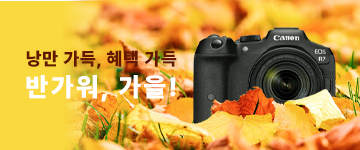
<style>
.page{position:relative;width:360px;height:150px}
.page>*{position:absolute;margin:0}
.t1{font:18px "Pretendard-Black";letter-spacing:0.05em;color:#641802}
.t2{font:26px "Pretendard-Black";letter-spacing:0.1em;color:#ffffff}
</style>
<div class="page">
<p class="t1" style="left:26px;top:50px;width:151px;height:52px">낭만 가득, 혜택 가득<br><span class="t2">반가워, 가을!</span></p>
</div>
